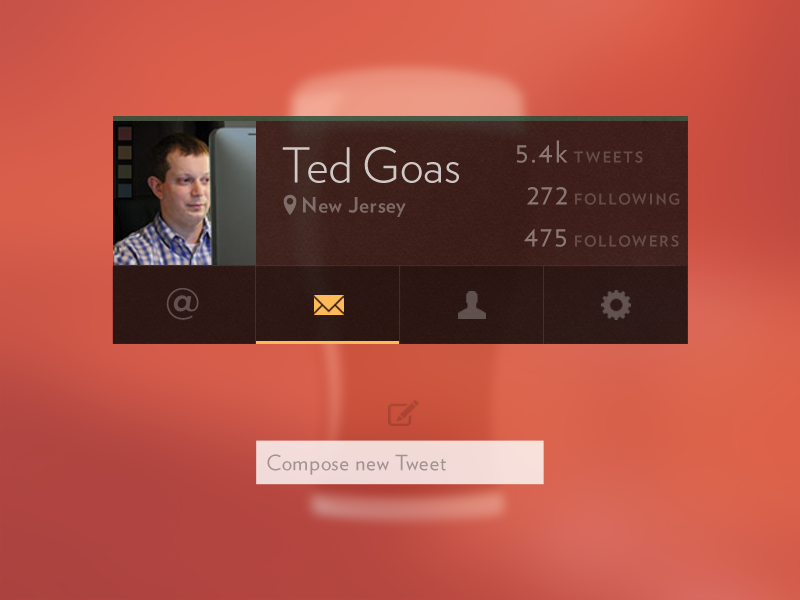
<style>
.page{position:relative;width:800px;height:600px}
.page>*{position:absolute;margin:0}
.t1{font:48px "Verlag-Light";color:#cfc7c6}
.t2{font:30px/42px "Verlag-Book";letter-spacing:0.05em;color:#8b7876}
.t3{font:15px/42px "Verlag-Bold";letter-spacing:0.1em;color:#654c49;text-transform:uppercase}
.t4{font:21px "Verlag-Bold";letter-spacing:0.025em;color:#7e6a67}
.t5{font:36px "GothamHTF-Medium";letter-spacing:0.1em;color:#61514f;text-transform:uppercase}
.t6{font:21px "Verlag-Book";letter-spacing:0.025em;color:#a29290}
</style>
<div class="page">
<p class="t1" style="left:282px;top:146px;width:177px;height:37px">Ted Goas</p>
<p class="t2" style="left:516px;top:140px;width:52px;height:107px;text-align:right">5.4k<br>272<br>475</p>
<p class="t3" style="left:574px;top:151px;width:106px;height:96px">tweets<br>following<br>followers</p>
<p class="t4" style="left:303px;top:196px;width:103px;height:21px">New Jersey</p>
<p class="t5" style="left:166px;top:288px;width:33px;height:32px">@</p>
<p class="t6" style="left:267px;top:454px;width:179px;height:21px">Compose new Tweet</p>
</div>
